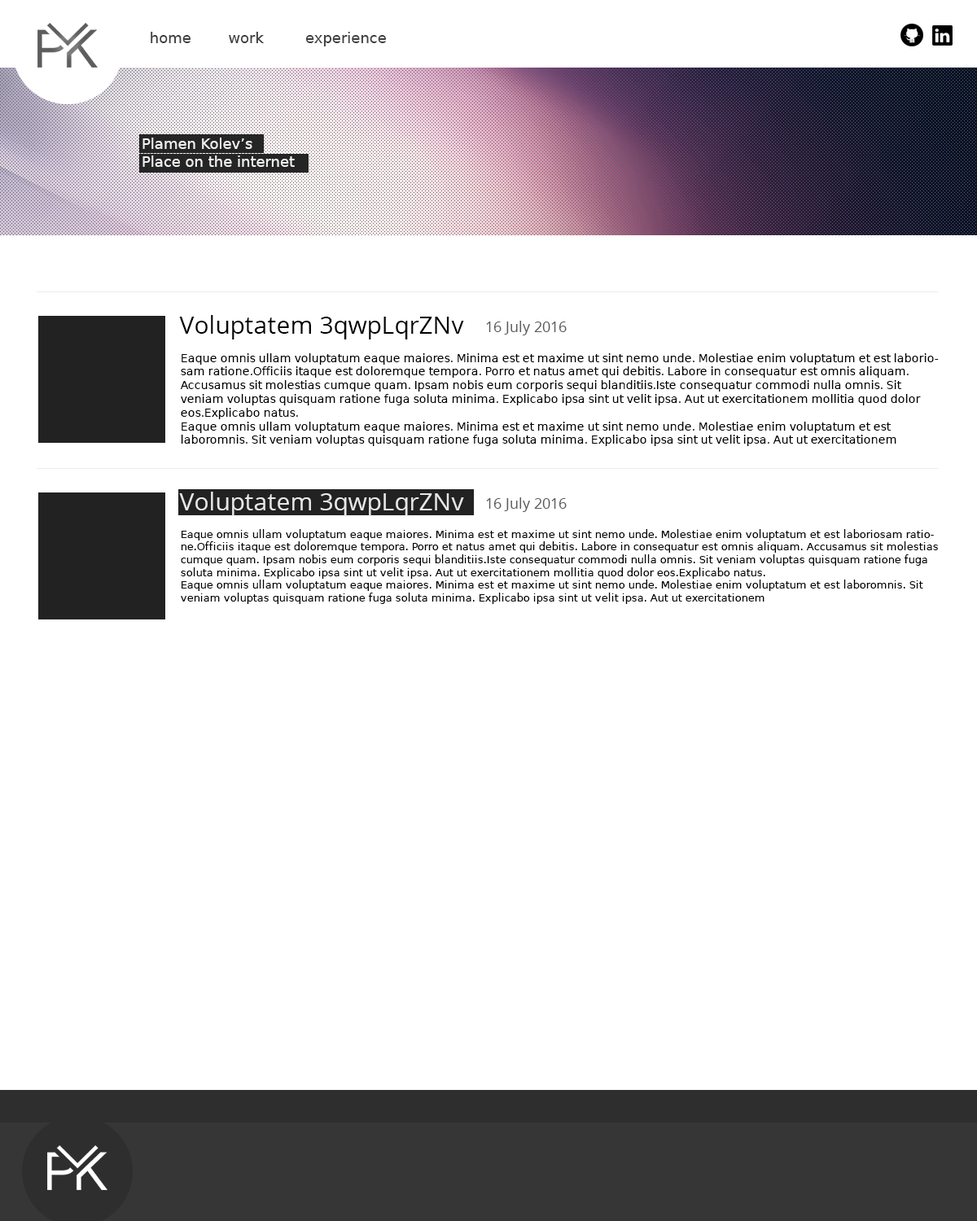
<style>
.page{position:relative;width:977px;height:1221px;background:#ffffff}
.page>*{position:absolute;margin:0}
.t1{font:14.7px "DejaVuSans";color:#404040}
.t2{font:14.7px "DejaVuSans";color:#f0f0f0}
.t3{font:24.4px "OpenSans";color:#000000}
.t4{font:14.7px "OpenSans";color:#5a5a5a}
.t5{font:11.4px "DejaVuSans";color:#000000}
.t6{font:24.4px "OpenSans";color:#e8e8e8}
.t7{font:10.6px "DejaVuSans";color:#000000}
</style>
<div class="page">
<p class="t1" style="left:151px;top:32px;width:39px;height:11px">home</p>
<p class="t1" style="left:229px;top:32px;width:35px;height:11px">work</p>
<p class="t1" style="left:305px;top:32px;width:81px;height:14px">experience</p>
<p class="t2" style="left:142px;top:138px;width:153px;height:29px;text-align:right">Plamen Kolev’s<br>Place on the internet</p>
<p class="t3" style="left:179px;top:315px;width:285px;height:24px">Voluptatem 3qwpLqrZNv</p>
<p class="t4" style="left:486px;top:321px;width:80px;height:14px">16 July 2016</p>
<p class="t5" style="left:180px;top:353px;width:758px;height:93px">Eaque omnis ullam voluptatum eaque maiores. Minima est et maxime ut sint nemo unde. Molestiae enim voluptatum et est laboriosam ratione.Officiis itaque est doloremque tempora. Porro et natus amet qui debitis. Labore in consequatur est omnis aliquam. Accusamus sit molestias cumque quam. Ipsam nobis eum corporis sequi blanditiis.Iste consequatur commodi nulla omnis. Sit veniam voluptas quisquam ratione fuga soluta minima. Explicabo ipsa sint ut velit ipsa. Aut ut exercitationem mollitia quod dolor eos.Explicabo natus.<br>Eaque omnis ullam voluptatum eaque maiores. Minima est et maxime ut sint nemo unde. Molestiae enim voluptatum et est laboromnis. Sit veniam voluptas quisquam ratione fuga soluta minima. Explicabo ipsa sint ut velit ipsa. Aut ut exercitationem</p>
<p class="t6" style="left:179px;top:492px;width:285px;height:24px">Voluptatem 3qwpLqrZNv</p>
<p class="t4" style="left:486px;top:497px;width:80px;height:15px">16 July 2016</p>
<p class="t7" style="left:181px;top:529px;width:757px;height:75px">Eaque omnis ullam voluptatum eaque maiores. Minima est et maxime ut sint nemo unde. Molestiae enim voluptatum et est laboriosam ratione.Officiis itaque est doloremque tempora. Porro et natus amet qui debitis. Labore in consequatur est omnis aliquam. Accusamus sit molestias cumque quam. Ipsam nobis eum corporis sequi blanditiis.Iste consequatur commodi nulla omnis. Sit veniam voluptas quisquam ratione fuga soluta minima. Explicabo ipsa sint ut velit ipsa. Aut ut exercitationem mollitia quod dolor eos.Explicabo natus.<br>Eaque omnis ullam voluptatum eaque maiores. Minima est et maxime ut sint nemo unde. Molestiae enim voluptatum et est laboromnis. Sit veniam voluptas quisquam ratione fuga soluta minima. Explicabo ipsa sint ut velit ipsa. Aut ut exercitationem</p>
</div>
